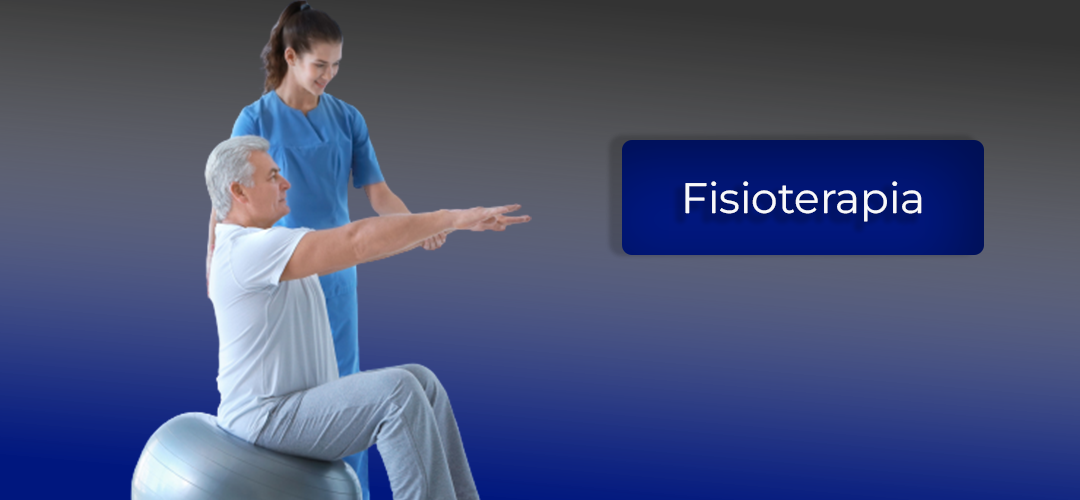
<style>
.page{position:relative;width:1080px;height:500px}
.page>*{position:absolute;margin:0}
.t1{font:42.3px "MontserratThin-Regular";color:#ffffff}
</style>
<div class="page">
<p class="t1" style="left:685px;top:181px;width:237px;height:41px;opacity:0.96">Fisioterapia</p>
</div>
